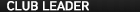
<style>
.page{position:relative;width:140px;height:12px}
.page>*{position:absolute;margin:0}
.t1{font:12.2px "HCRDotum-Bold";color:#ffffff}
</style>
<div class="page">
<p class="t1" style="left:7px;top:1px;width:82px;height:10px">CLUB LEADER</p>
</div>
